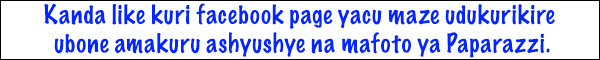
<style>
.page{position:relative;width:600px;height:60px;background:#ffffff}
.page>*{position:absolute;margin:0}
.t1{font:24px "MarkerFelt-Thin";color:#0226fe}
</style>
<div class="page">
<p class="t1" style="left:44px;top:3px;width:511px;height:55px;text-align:center">Kanda like kuri facebook page yacu maze udukurikire <br>ubone amakuru ashyushye na mafoto ya Paparazzi.</p>
</div>
